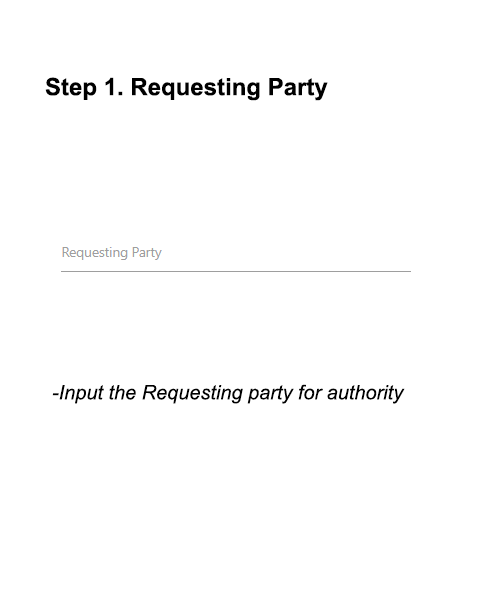
<style>
.page{position:relative;width:500px;height:600px;background:#ffffff}
.page>*{position:absolute;margin:0}
.t1{font:24px "Arial-BoldMT";color:#000000}
.t2{font:20px "Arial-ItalicMT";color:#000000}
</style>
<div class="page">
<p class="t1" style="left:45px;top:77px;width:283px;height:24px">Step 1. Requesting Party</p>
<p class="t2" style="left:52px;top:384px;width:353px;height:20px">-Input the Requesting party for authority</p>
</div>
